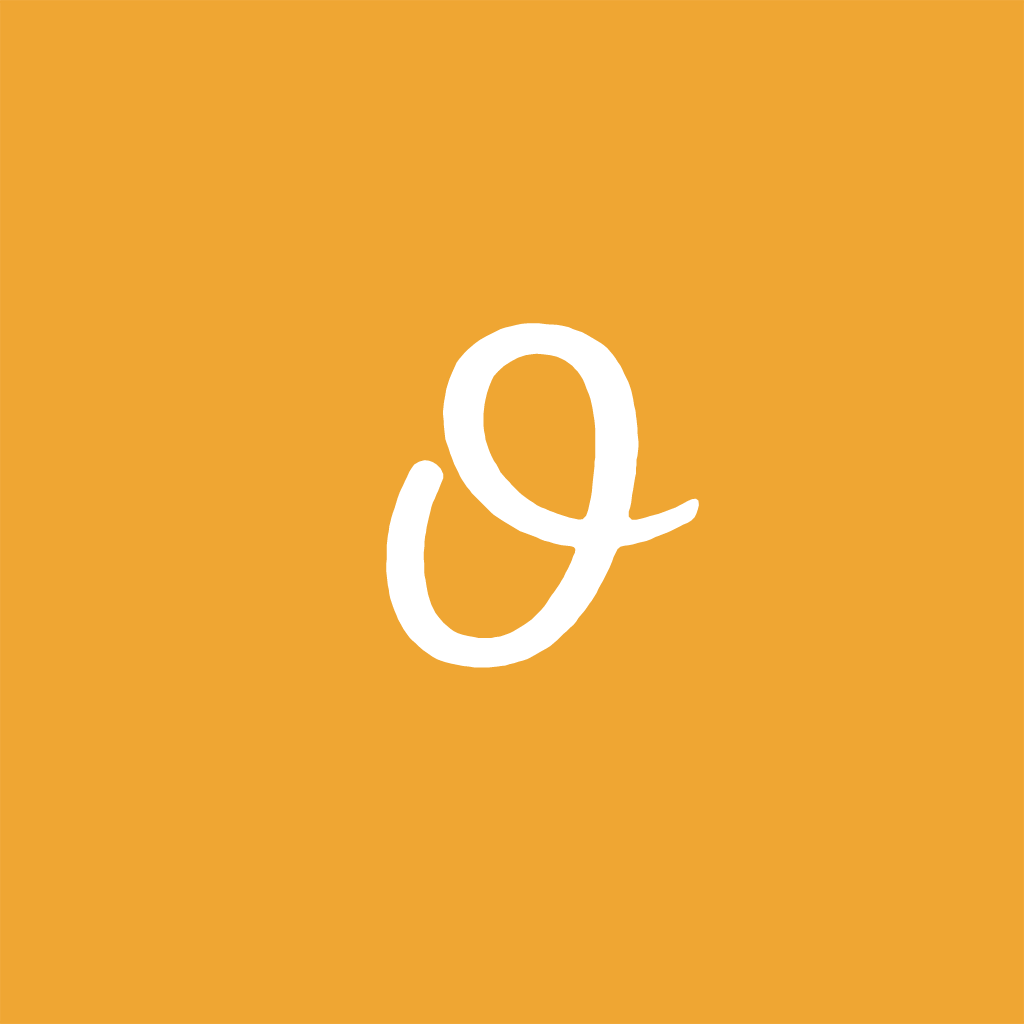
<style>
.page{position:relative;width:1024px;height:1024px;background:#efa633}
.page>*{position:absolute;margin:0}
.t1{font:487.2px "NexaRustScriptL-0";color:#ffffff}
</style>
<div class="page">
<p class="t1" style="left:386px;top:323px;width:313px;height:345px">O</p>
</div>
